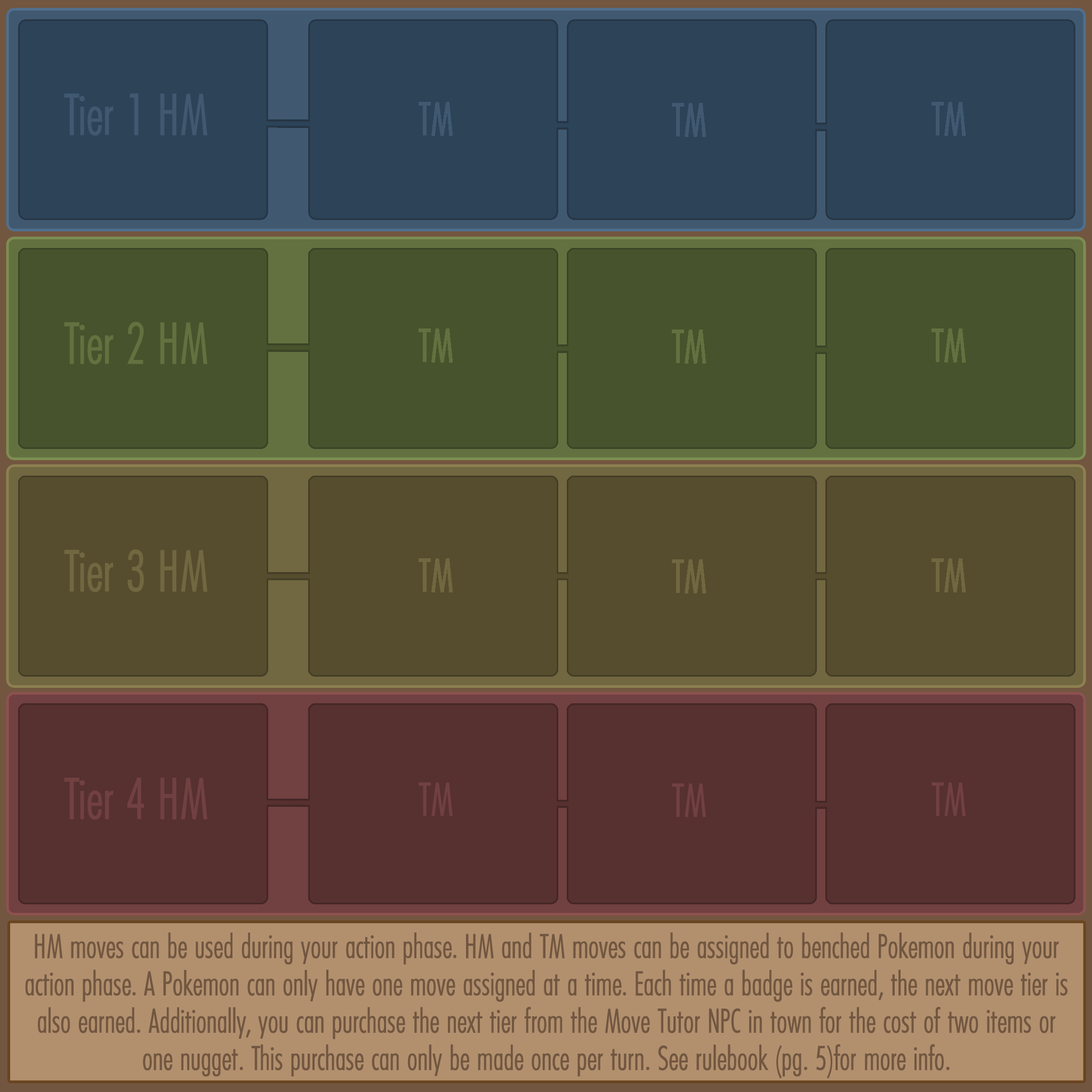
<style>
.page{position:relative;width:1092px;height:1092px}
.page>*{position:absolute;margin:0}
.t1{font:58.7px "FuturaCondensedBQ-Light";letter-spacing:-0.025em;color:#405971;font-weight:bold;scale:0.91 1}
.t2{font:58.7px "FuturaCondensedBQ-Light";letter-spacing:-0.025em;color:#637140;font-weight:bold;scale:0.91 1}
.t3{font:58.7px "FuturaCondensedBQ-Light";letter-spacing:-0.025em;color:#716740;font-weight:bold;scale:0.91 1}
.t4{font:58.7px "FuturaCondensedBQ-Light";letter-spacing:-0.025em;color:#714040;font-weight:bold;scale:0.91 1}
.t5{font:34.2px "FuturaCondensedBQ-Light";letter-spacing:-0.025em;color:#715640;font-weight:bold;scale:0.91 1}
</style>
<div class="page">
<p class="t1" style="left:64px;top:93px;width:143px;height:43px">Tier 1 HM</p>
<p class="t2" style="left:64px;top:322px;width:143px;height:43px">Tier 2 HM</p>
<p class="t3" style="left:64px;top:549px;width:143px;height:43px">Tier 3 HM</p>
<p class="t4" style="left:64px;top:777px;width:143px;height:43px">Tier 4 HM</p>
<p class="t5" style="left:25px;top:932px;width:1042px;height:147px;text-align:center">HM moves can be used during your action phase. HM and TM moves can be assigned to benched Pokemon during your action phase. A Pokemon can only have one move assigned at a time. Each time a badge is earned, the next move tier is also earned. Additionally, you can purchase the next tier from the Move Tutor NPC in town for the cost of two items or one nugget. This purchase can only be made once per turn. See rulebook (pg. 5)for more info.</p>
</div>
